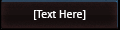
<style>
.page{position:relative;width:120px;height:30px;background:#191111}
.page>*{position:absolute;margin:0}
.t1{font:12px "Calibri";color:#ffffff}
</style>
<div class="page">
<p class="t1" style="left:34px;top:10px;width:52px;height:10px">[Text Here]</p>
</div>
